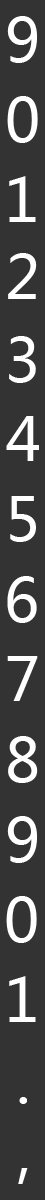
<style>
.page{position:relative;width:45px;height:1200px;background:#333333}
.page>*{position:absolute;margin:0}
.t1{font:60px "MicrosoftYaHei";color:#ffffff}
</style>
<div class="page">
<p class="t1" style="left:7px;top:16px;width:30px;height:47px">9</p>
<p class="t1" style="left:7px;top:96px;width:31px;height:47px">0</p>
<p class="t1" style="left:9px;top:176px;width:27px;height:46px">1</p>
<p class="t1" style="left:8px;top:253px;width:29px;height:46px">2</p>
<p class="t1" style="left:9px;top:336px;width:27px;height:47px">3</p>
<p class="t1" style="left:6px;top:416px;width:33px;height:45px">4</p>
<p class="t1" style="left:10px;top:496px;width:26px;height:46px">5</p>
<p class="t1" style="left:7px;top:576px;width:30px;height:47px">6</p>
<p class="t1" style="left:7px;top:656px;width:31px;height:45px">7</p>
<p class="t1" style="left:8px;top:736px;width:30px;height:47px">8</p>
<p class="t1" style="left:7px;top:816px;width:30px;height:47px">9</p>
<p class="t1" style="left:6px;top:896px;width:31px;height:47px">0</p>
<p class="t1" style="left:9px;top:976px;width:27px;height:46px">1</p>
<p class="t1" style="left:19px;top:1097px;width:8px;height:7px">.</p>
<p class="t1" style="left:18px;top:1168px;width:10px;height:16px">,</p>
</div>
